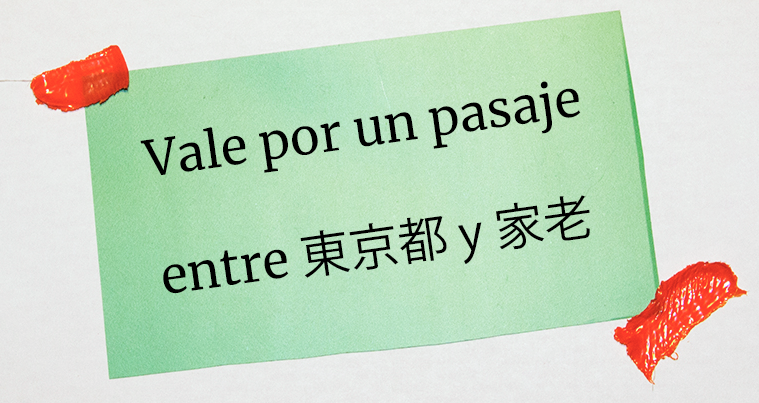
<style>
.page{position:relative;width:759px;height:403px}
.page>*{position:absolute;margin:0}
.t1{font:49.4px "Merriweather-Regular";color:#000000}
.t2{font:49.4px "KozGoPr6N-Regular";color:#000000}
</style>
<div class="page">
<p class="t1" style="left:140px;top:81px;width:450px;height:213px;rotate:-8deg">Vale por un pasaje<br><br>entre <span class="t2">東京都 y 家老</span></p>
</div>
